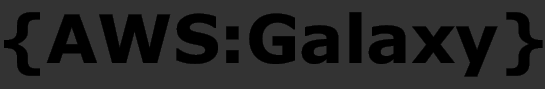
<style>
.page{position:relative;width:545px;height:89px;background:#333333}
.page>*{position:absolute;margin:0}
.t1{font:66.8px "Verdana-Bold";color:#000000}
</style>
<div class="page">
<p class="t1" style="left:4px;top:12px;width:539px;height:65px">{AWS:Galaxy}</p>
</div>
